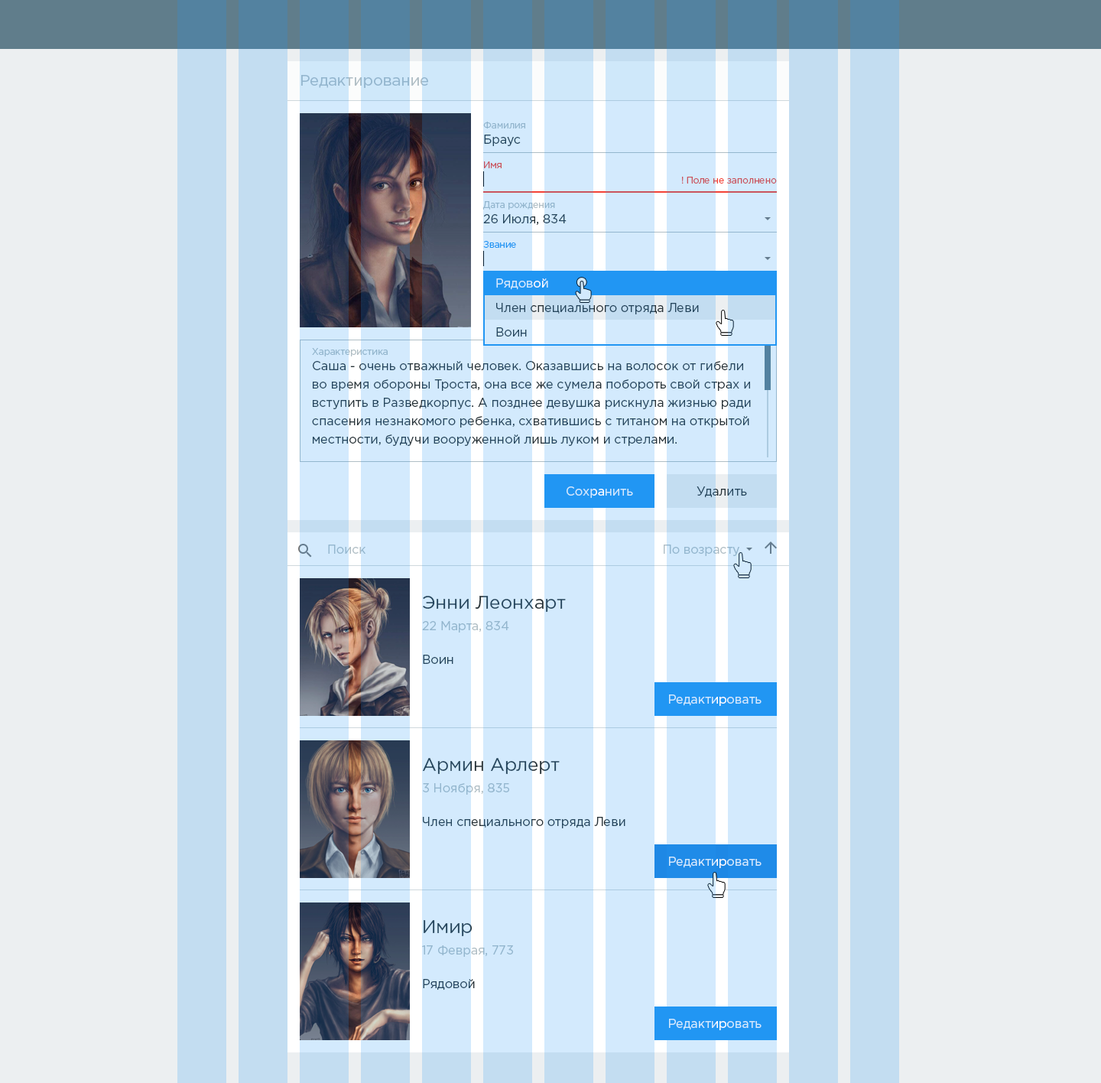
<style>
.page{position:relative;width:1101px;height:1083px;background:#eceff1}
.page>*{position:absolute;margin:0}
.t1{font:15.3px "GothamPro";color:#93b6ce}
.t2{font:9.2px "GothamPro";color:#93b6ce}
.t3{font:12.2px "GothamPro";color:#25465d}
.t4{font:9.2px "GothamPro";color:#ca545c}
.t5{font:9.2px "GothamPro";color:#2196f3}
.t6{font:12.2px "GothamPro";color:#d3eafd}
.t7{font:9.2px "GothamPro";color:#93b6cd}
.t8{font:12.2px/18.4px "GothamPro";color:#25465d}
.t9{font:12.2px "GothamPro"}
.t10{font:12.2px "GothamPro";color:#93b6ce}
.t11{font:18.4px "GothamPro";color:#25465d}
</style>
<div class="page">
<p class="t1" style="left:301px;top:75px;width:127px;height:13px">Редактирование</p>
<p class="t2" style="left:483px;top:122px;width:42px;height:6px">Фамилия</p>
<p class="t3" style="left:484px;top:135px;width:37px;height:11px">Браус</p>
<p class="t4" style="left:484px;top:161px;width:18px;height:7px">Имя</p>
<p class="t4" style="left:682px;top:177px;width:95px;height:7px">! Поле не заполнено</p>
<p class="t2" style="left:483px;top:201px;width:72px;height:9px">Дата рождения</p>
<p class="t3" style="left:483px;top:214px;width:84px;height:11px">26 Июля, 834</p>
<p class="t5" style="left:483px;top:241px;width:33px;height:7px">Звание</p>
<p class="t6" style="left:496px;top:278px;width:52px;height:12px">Рядовой</p>
<p class="t3" style="left:496px;top:303px;width:203px;height:11px">Член специального отряда Леви</p>
<p class="t3" style="left:496px;top:327px;width:31px;height:9px">Воин</p>
<p class="t7" style="left:312px;top:348px;width:76px;height:8px">Характеристика</p>
<p class="t8" style="left:312px;top:361px;width:439px;height:85px">Саша - очень отважный человек. Оказавшись на волосок от гибели во время обороны Троста, она все же сумела побороть свой страх и вступить в Разведкорпус. А позднее девушка рискнула жизнью ради спасения незнакомого ребенка, схватившись с титаном на открытой местности, будучи вооруженной лишь луком и стрелами.</p>
<p class="t6" style="left:567px;top:486px;width:66px;height:12px">Сохранить</p>
<p class="t3" style="left:697px;top:486px;width:50px;height:12px">Удалить</p>
<p class="t9" style="left:328px;top:544px;width:38px;height:10px">Поиск</p>
<p class="t10" style="left:664px;top:544px;width:75px;height:12px">По возрасту</p>
<p class="t11" style="left:423px;top:596px;width:143px;height:16px">Энни Леонхарт</p>
<p class="t10" style="left:422px;top:621px;width:87px;height:11px">22 Марта, 834</p>
<p class="t3" style="left:423px;top:655px;width:30px;height:9px">Воин</p>
<p class="t6" style="left:669px;top:694px;width:93px;height:12px">Редактировать</p>
<p class="t11" style="left:423px;top:758px;width:137px;height:16px">Армин Арлерт</p>
<p class="t10" style="left:423px;top:783px;width:86px;height:12px">3 Ноября, 835</p>
<p class="t3" style="left:423px;top:817px;width:203px;height:11px">Член специального отряда Леви</p>
<p class="t6" style="left:669px;top:856px;width:93px;height:12px">Редактировать</p>
<p class="t11" style="left:424px;top:920px;width:49px;height:16px">Имир</p>
<p class="t10" style="left:422px;top:945px;width:91px;height:12px">17 Феврая, 773</p>
<p class="t3" style="left:423px;top:979px;width:52px;height:11px">Рядовой</p>
<p class="t6" style="left:669px;top:1019px;width:93px;height:11px">Редактировать</p>
</div>
